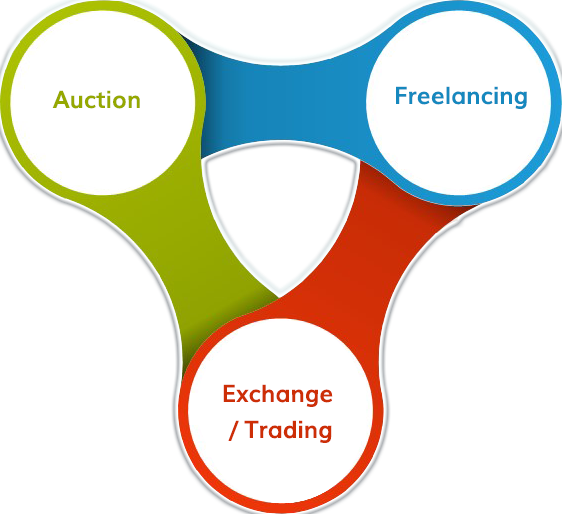
<style>
.page{position:relative;width:562px;height:514px;background:#ffffff}
.page>*{position:absolute;margin:0}
.t1{font:24px "Muli-Bold";color:#1688be}
.t2{font:24px "Muli-Bold";color:#95a800}
.t3{font:24px/36px "Muli-Bold";color:#cd2e06}
</style>
<div class="page">
<p class="t1" style="left:396px;top:86px;width:131px;height:23px">Freelancing</p>
<p class="t2" style="left:52px;top:90px;width:88px;height:19px">Auction</p>
<p class="t3" style="left:223px;top:384px;width:110px;height:59px;text-align:center">Exchange <br>/ Trading</p>
</div>
